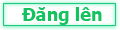
<style>
.page{position:relative;width:120px;height:30px}
.page>*{position:absolute;margin:0}
.t1{font:18px "Tahoma-Bold";color:#13c35e}
</style>
<div class="page">
<p class="t1" style="left:22px;top:7px;width:80px;height:18px">Đăng lên</p>
</div>
